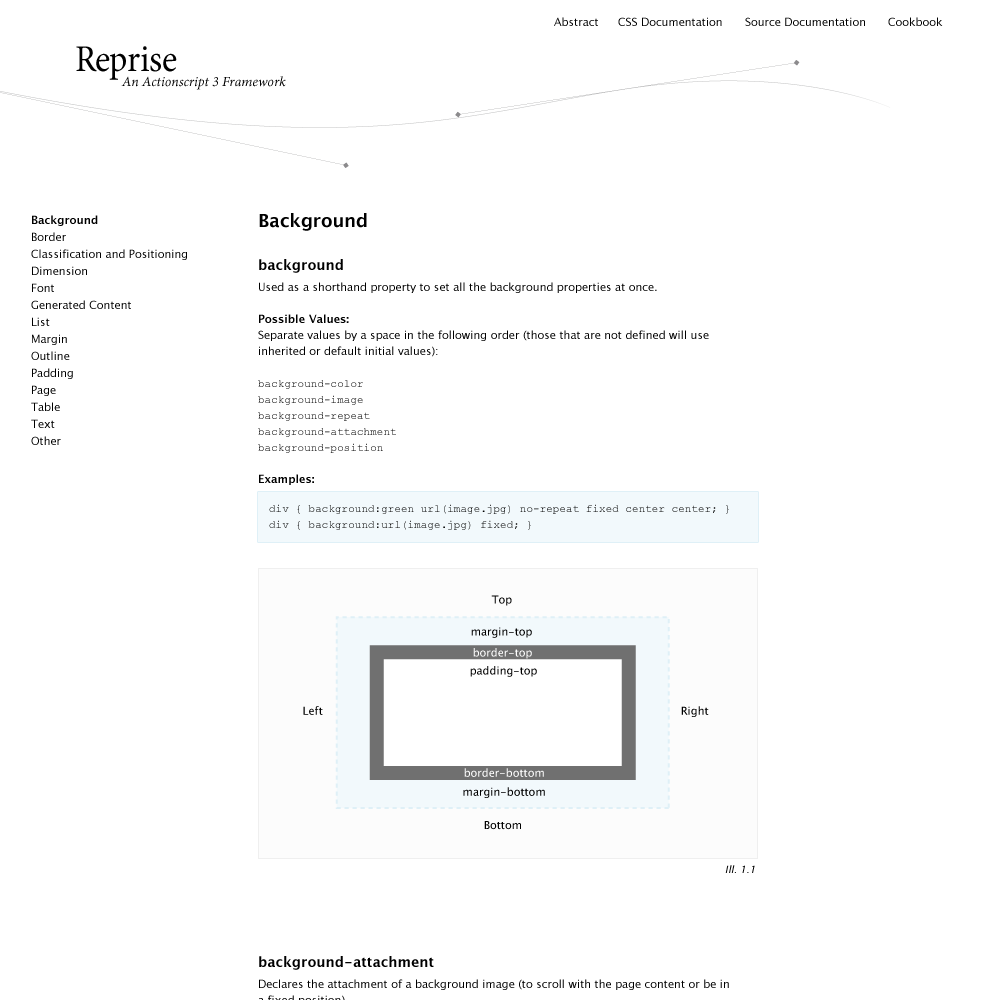
<style>
.page{position:relative;width:1000px;height:1000px;background:#ffffff}
.page>*{position:absolute;margin:0}
.t1{font:11px "LucidaGrande";color:#000000}
.t2{font:38.1px "MinionPro-Cn";color:#000000}
.t3{font:14px "MinionPro-It";color:#000000}
.t4{font:11px/17px "LucidaGrande";color:#000000}
.t5{font:11px/17px "LucidaGrande-Bold";color:#000000}
.t6{font:18px "LucidaGrande-Bold";color:#000000}
.t7{font:14px "LucidaGrande-Bold";color:#000000}
.t8{font:11px/16px "LucidaGrande";color:#000000}
.t9{font:11px/16px "LucidaGrande-Bold";color:#000000}
.t10{font:11px/16px "CourierNewPSMT";color:#000000}
.t11{font:10px "LucidaSans-Italic";color:#000000}
</style>
<div class="page">
<p class="t1" style="left:554px;top:17px;width:44px;height:9px">Abstract</p>
<p class="t1" style="left:618px;top:17px;width:104px;height:9px">CSS Documentation</p>
<p class="t1" style="left:745px;top:17px;width:120px;height:9px">Source Documentation</p>
<p class="t1" style="left:888px;top:17px;width:55px;height:9px">Cookbook</p>
<p class="t2" style="left:76px;top:46px;width:101px;height:34px">Reprise</p>
<p class="t3" style="left:121px;top:76px;width:165px;height:14px">An Actionscript 3 Framework</p>
<p class="t4" style="left:31px;top:215px;width:156px;height:230px"><span class="t5">Background<br></span>Border<br>Classification and Positioning<br>Dimension<br>Font<br>Generated Content<br>List<br>Margin<br>Outline<br>Padding<br>Page<br>Table<br>Text<br>Other</p>
<p class="t6" style="left:259px;top:213px;width:108px;height:18px">Background</p>
<p class="t7" style="left:259px;top:259px;width:84px;height:14px">background</p>
<p class="t8" style="left:258px;top:282px;width:451px;height:203px">Used as a shorthand property to set all the background properties at once.<br><br><span class="t9">Possible Values:<br></span>Separate values by a space in the following order (those that are not defined will use inherited or default initial values):<br><br><span class="t10">background-color<br>background-image<br>background-repeat <br>background-attachment <br>background-position<br><br></span><span class="t9">Examples:</span></p>
<p class="t10" style="left:269px;top:504px;width:460px;height:26px">div { background:green url(image.jpg) no-repeat fixed center center; }<br>div { background:url(image.jpg) fixed; }</p>
<p class="t11" style="left:725px;top:865px;width:30px;height:8px">Ill. 1.1</p>
<p class="t7" style="left:259px;top:956px;width:175px;height:14px">background-attachment</p>
</div>
